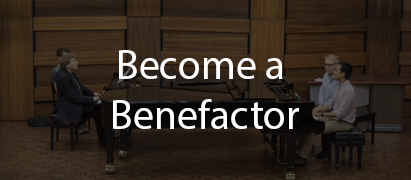
<style>
.page{position:relative;width:411px;height:180px}
.page>*{position:absolute;margin:0}
.t1{font:41.7px "MyriadPro-Regular";color:#ffffff}
</style>
<div class="page">
<p class="t1" style="left:113px;top:50px;width:186px;height:79px;text-align:center">Become a <br>Benefactor</p>
</div>
